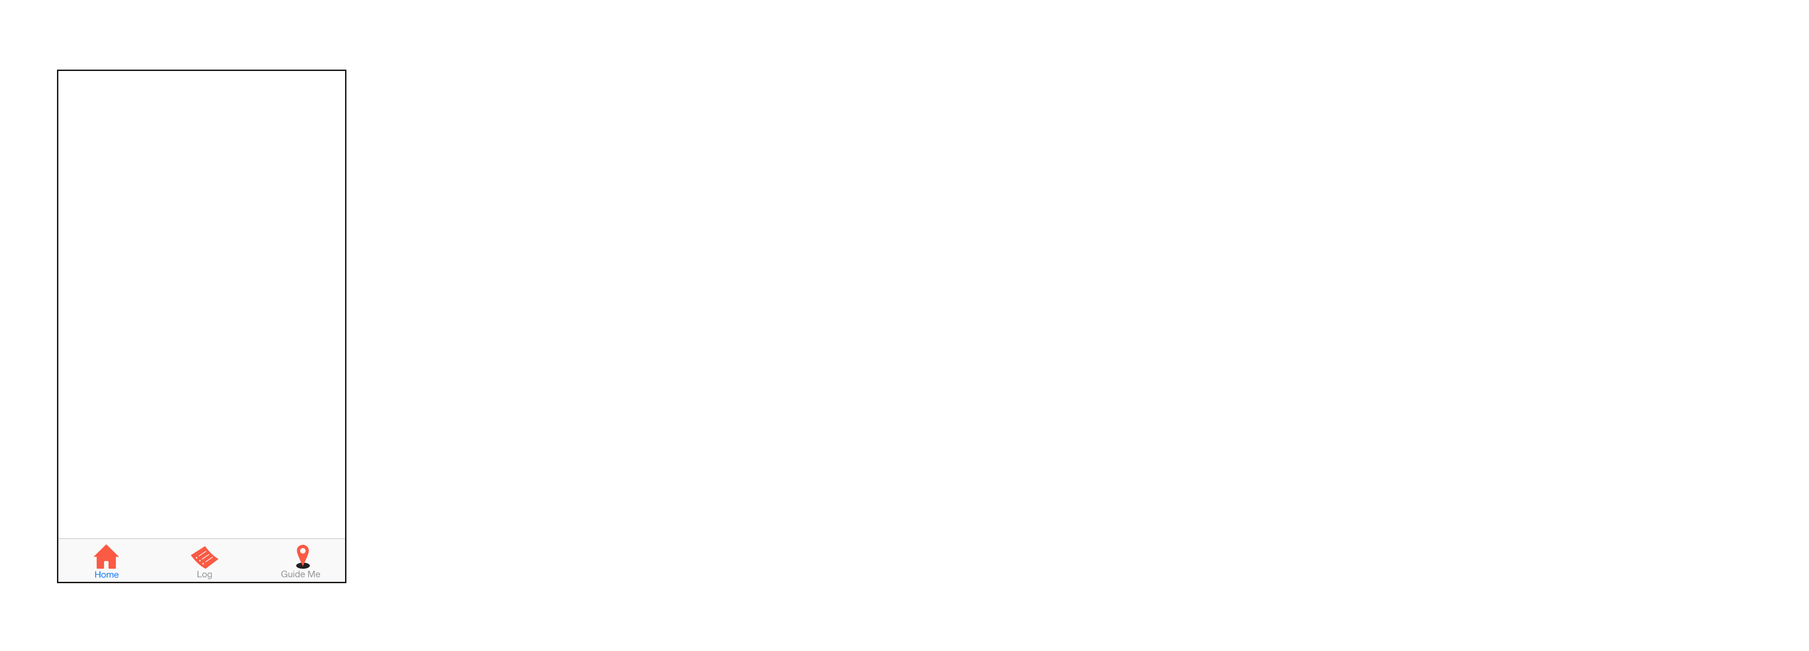
<style>
.page{position:relative;width:1809px;height:651px;background:#ffffff}
.page>*{position:absolute;margin:0}
.t1{font:9px "HelveticaNeue";color:#007aff}
.t2{font:9px "HelveticaNeue";color:#929292}
</style>
<div class="page">
<p class="t1" style="left:95px;top:571px;width:23px;height:7px">Home</p>
<p class="t2" style="left:197px;top:571px;width:15px;height:8px">Log</p>
<p class="t2" style="left:281px;top:571px;width:39px;height:6px">Guide Me</p>
</div>
